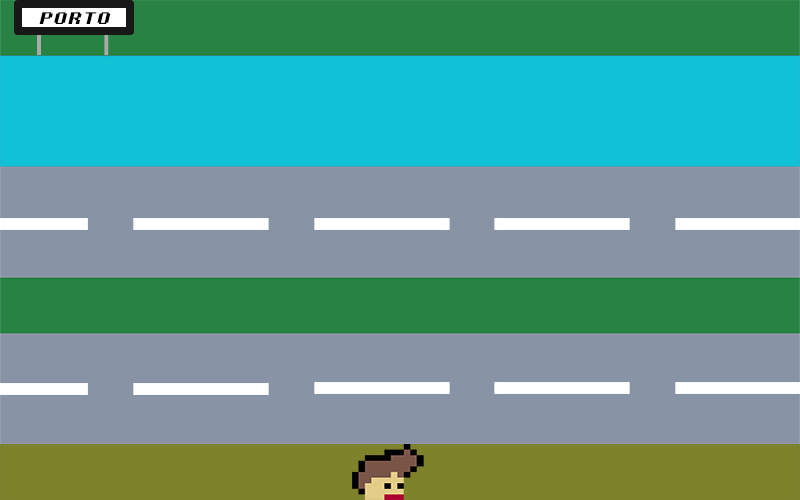
<style>
.page{position:relative;width:800px;height:500px;background:#8893a6}
.page>*{position:absolute;margin:0}
.t1{font:16.7px "Fixedsys";color:#000000;font-style:italic;scale:1.38 1}
</style>
<div class="page">
<p class="t1" style="left:39px;top:12px;width:72px;height:12px">PORTO</p>
</div>
